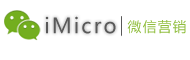
<style>
.page{position:relative;width:190px;height:60px;background:#ffffff}
.page>*{position:absolute;margin:0}
.t1{font:20.7px "MicrosoftYaHei";letter-spacing:0.1em;color:#595959}
.t2{font:13.8px "MicrosoftYaHei";letter-spacing:0.1em;color:#91be3f}
</style>
<div class="page">
<p class="t1" style="left:45px;top:16px;width:71px;height:18px">iMicro</p>
<p class="t2" style="left:127px;top:20px;width:59px;height:14px">微信营销</p>
</div>
